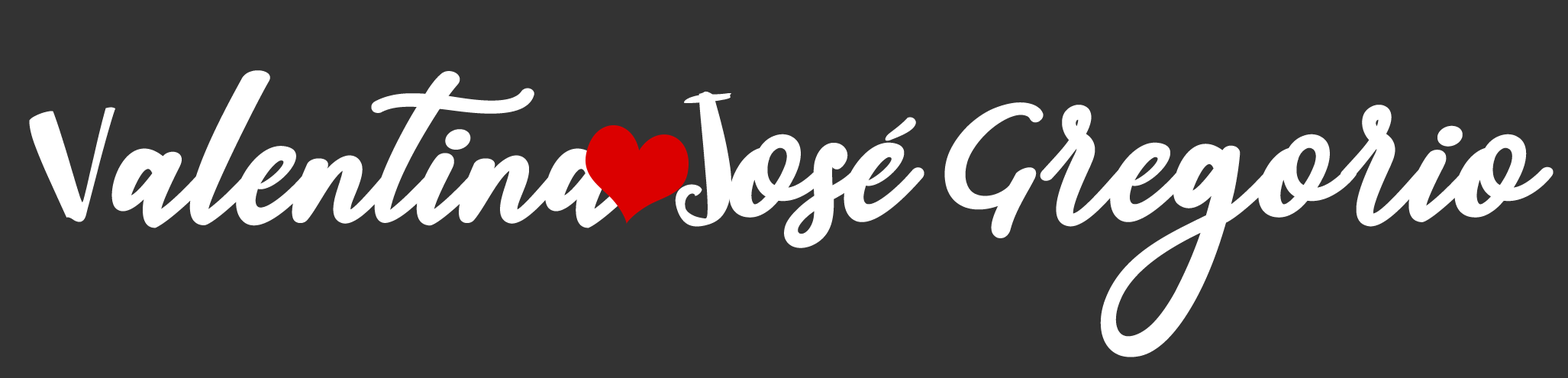
<style>
.page{position:relative;width:1568px;height:378px;background:#333333}
.page>*{position:absolute;margin:0}
.t1{font:167.9px "sophia-script";letter-spacing:-0.01em;color:#ffffff}
.t2{font:167.9px "SophiaLeft";letter-spacing:-0.01em;color:#ffffff}
</style>
<div class="page">
<p class="t1" style="left:29px;top:70px;width:617px;height:158px"><span class="t2">V</span>alentina</p>
<p class="t1" style="left:675px;top:91px;width:878px;height:266px"><span class="t2">J</span>osé Gregorio</p>
</div>
